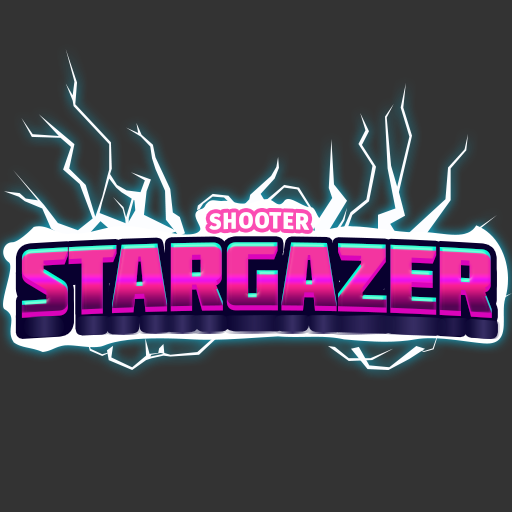
<style>
.page{position:relative;width:512px;height:512px;background:#333333}
.page>*{position:absolute;margin:0}
.t1{font:22.7px "FiraSans-Heavy";letter-spacing:0.05em;color:#ffffff;scale:0.96 1}
.t2{font:97px "Molot";letter-spacing:-0.025em}
</style>
<div class="page">
<p class="t1" style="left:209px;top:211px;width:101px;height:19px">SHOOTER</p>
<p class="t2" style="left:21px;top:242px;width:471px;height:76px">STARGAZER</p>
</div>
